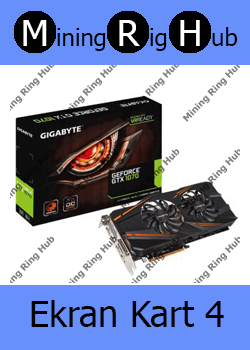
<style>
.page{position:relative;width:250px;height:350px;background:#ffffff}
.page>*{position:absolute;margin:0}
.t1{font:36px "Tahoma";color:#ffffff}
.t2{font:24px "Tahoma";color:#000000}
.t3{font:36px "Tahoma";color:#000000}
</style>
<div class="page">
<p class="t1" style="left:23px;top:20px;width:24px;height:26px">M</p>
<p class="t2" style="left:57px;top:28px;width:49px;height:23px">ining</p>
<p class="t1" style="left:119px;top:20px;width:21px;height:26px">R</p>
<p class="t2" style="left:150px;top:28px;width:17px;height:23px">ig</p>
<p class="t1" style="left:180px;top:20px;width:20px;height:26px">H</p>
<p class="t2" style="left:212px;top:27px;width:26px;height:19px">ub</p>
<p class="t3" style="left:31px;top:300px;width:193px;height:27px">Ekran Kart 4</p>
</div>
